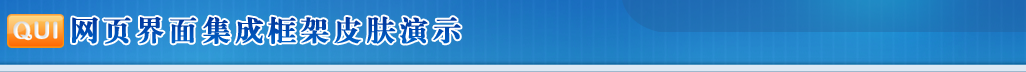
<style>
.page{position:relative;width:1026px;height:72px}
.page>*{position:absolute;margin:0}
.t1{font:28px "FZXBSJW--GB1-0";letter-spacing:0.15em;color:#014db2;font-weight:bold}
</style>
<div class="page">
<p class="t1" style="left:72px;top:16px;width:389px;height:28px">网页界面集成框架皮肤演示</p>
</div>
